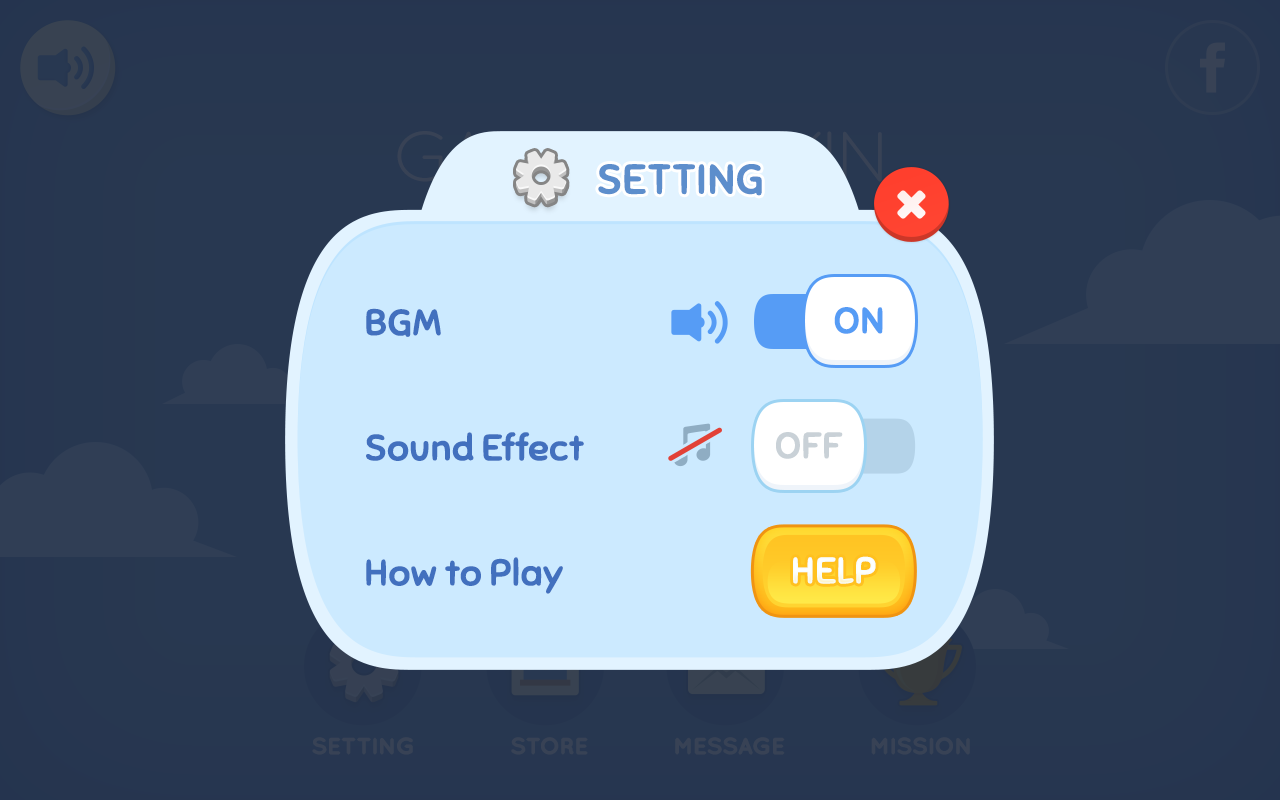
<style>
.page{position:relative;width:1280px;height:800px;background:#cceaff}
.page>*{position:absolute;margin:0}
.t1{font:40.4px "Sniglet-Regular";letter-spacing:-0.025em;color:#5d8ecc;text-transform:uppercase;font-weight:bold;scale:1.06 1}
.t2{font:35.6px/125px "Sniglet-Regular";letter-spacing:-0.025em;color:#4270be;font-weight:bold;scale:1.06 1}
.t3{font:35.6px "Sniglet-Regular";color:#569cf5;font-weight:bold;scale:1.05 1}
.t4{font:35.6px "Sniglet-Regular";color:#c9d1d7;font-weight:bold;scale:1.05 1}
.t5{font:35.6px "Sniglet-Regular";color:#ffffff;font-weight:bold;scale:1.05 1}
</style>
<div class="page">
<p class="t1" style="left:598px;top:164px;width:164px;height:32px">SETTING</p>
<p class="t2" style="left:366px;top:308px;width:218px;height:286px">BGM<br>Sound Effect<br>How to Play</p>
<p class="t3" style="left:834px;top:307px;width:49px;height:27px">ON</p>
<p class="t4" style="left:776px;top:432px;width:67px;height:27px">OFF</p>
<p class="t5" style="left:793px;top:556px;width:83px;height:28px">HELP</p>
</div>
